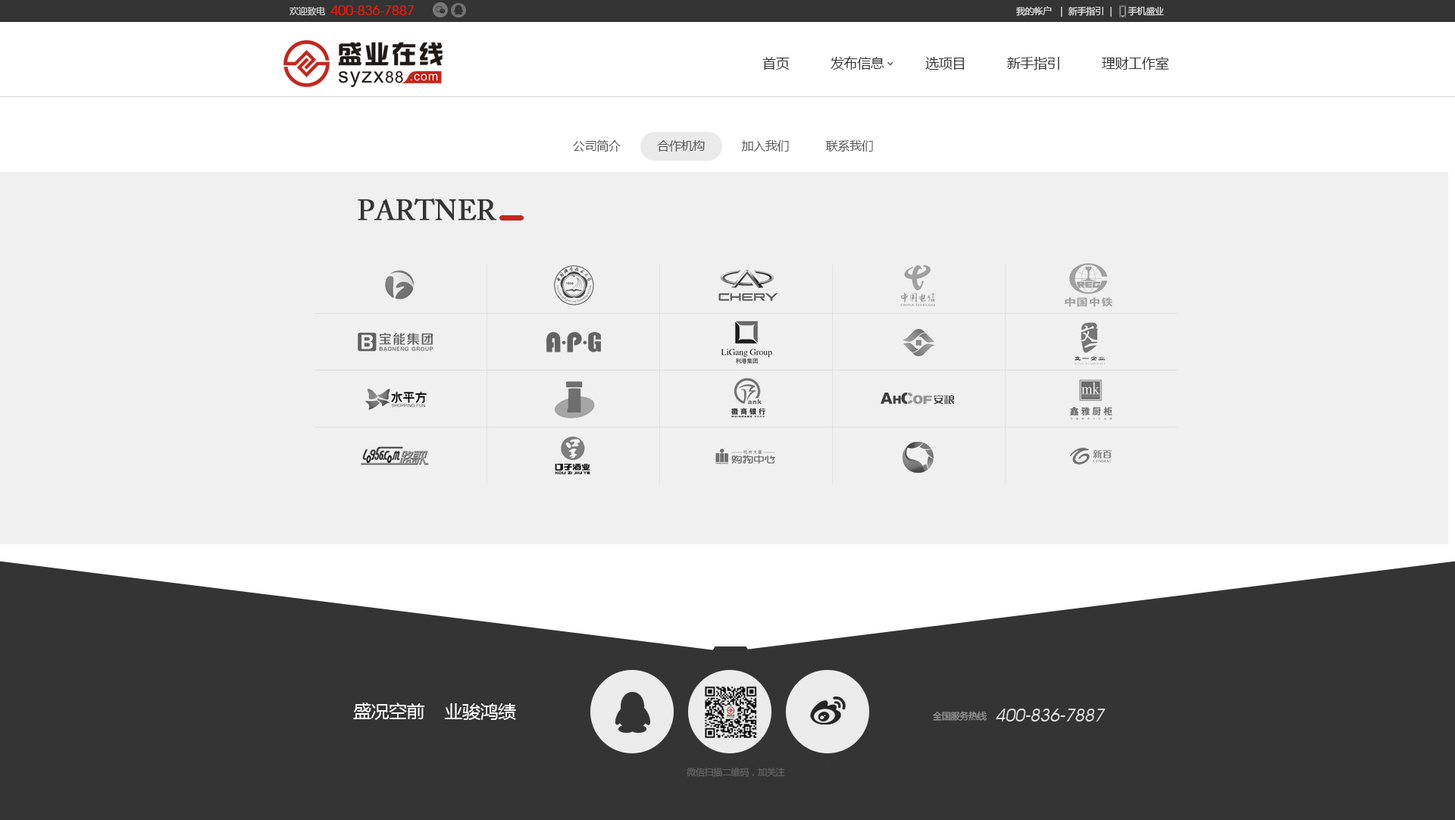
<style>
.page{position:relative;width:1455px;height:820px;background:#f0f0f0}
.page>*{position:absolute;margin:0}
.t1{font:13.6px "AvantGardeITCbyBT-Book";letter-spacing:-0.02em;color:#ff0f01}
.t2{font:9.1px "MicrosoftYaHei";letter-spacing:-0.02em;color:#d3d3d3}
.t3{font:9.1px "MicrosoftYaHei";letter-spacing:-0.02em;color:#e1e1e1}
.t4{font:13.6px "MicrosoftYaHei";letter-spacing:-0.02em;color:#333333}
.t5{font:12.1px "MicrosoftYaHei";letter-spacing:-0.02em;color:#535353}
.t6{font:27.9px "ACaslonPro-Regular";letter-spacing:-0.02em;color:#343434;text-transform:uppercase;font-weight:bold}
.t7{font:18.2px "MicrosoftYaHei";letter-spacing:-0.02em;color:#ffffff}
.t8{font:9.1px "MicrosoftYaHei";letter-spacing:-0.02em;color:#9a9a9a}
.t9{font:18px "AvantGardeITCbyBT-Book";letter-spacing:-0.02em;color:#e1e1e1;font-style:italic}
.t10{font:9.1px "MicrosoftYaHei";letter-spacing:-0.02em;color:#646464}
</style>
<div class="page">
<p class="t1" style="left:330px;top:5px;width:84px;height:10px">400-836-7887</p>
<p class="t2" style="left:289px;top:7px;width:36px;height:9px">欢迎致电</p>
<p class="t3" style="left:1016px;top:6px;width:148px;height:11px">我的帐户  ｜ 新手指引 ｜     手机盛业</p>
<p class="t4" style="left:762px;top:56px;width:407px;height:14px">首页           发布信息           选项目           新手指引           理财工作室</p>
<p class="t5" style="left:573px;top:139px;width:300px;height:13px">公司简介           合作机构           加入我们           联系我们</p>
<p class="t6" style="left:358px;top:198px;width:139px;height:22px">partner</p>
<p class="t7" style="left:353px;top:702px;width:163px;height:18px">盛况空前    业骏鸿绩</p>
<p class="t8" style="left:933px;top:711px;width:53px;height:9px">全国服务热线</p>
<p class="t9" style="left:996px;top:708px;width:109px;height:13px">400-836-7887</p>
<p class="t10" style="left:686px;top:767px;width:99px;height:10px">微信扫描二维码，加关注</p>
</div>
